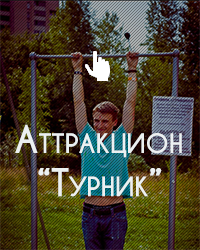
<style>
.page{position:relative;width:200px;height:250px}
.page>*{position:absolute;margin:0}
.t1{font:36px "CaviarDreams-Bold";color:#ecf0f1;font-variant:small-caps}
</style>
<div class="page">
<p class="t1" style="left:15px;top:124px;width:167px;height:73px;text-align:center">Аттракцион<br>“Турник”</p>
</div>
